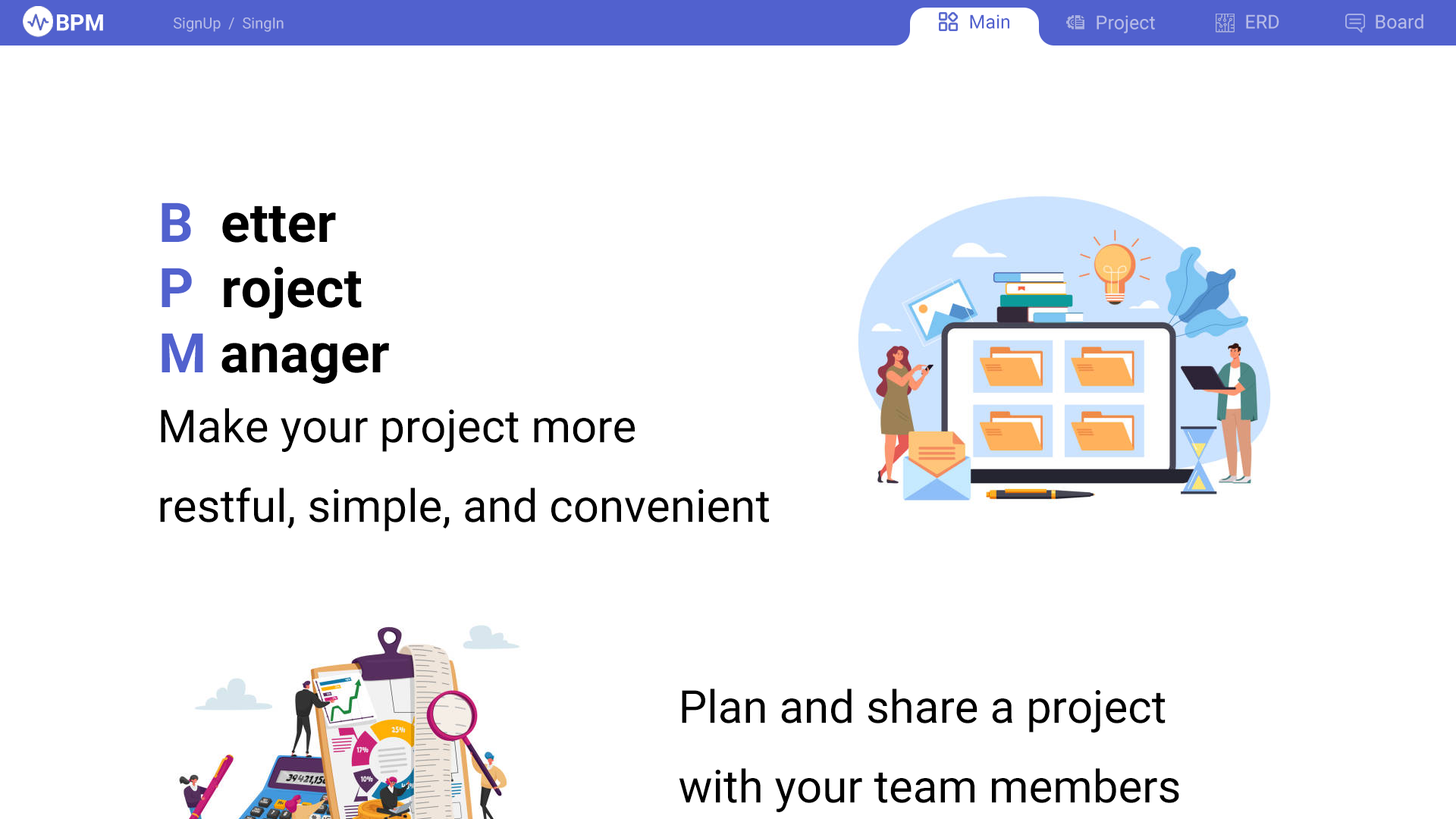
<style>
.page{position:relative;width:1456px;height:819px;background:#ffffff}
.page>*{position:absolute;margin:0}
.t1{font:22.7px "Roboto-Bold";color:#ffffff}
.t2{font:15.2px "Roboto-Regular";color:#b6bbe7}
.t3{font:19px "Roboto-Regular";color:#5161ce}
.t4{font:19px "Roboto-Regular";color:#b6bbe7}
.t5{font:54.6px/65.2px "Roboto-Bold";color:#000000}
.t6{font:54.6px/65.2px "Roboto-Bold";color:#5161ce}
.t7{font:45.5px "Roboto-Regular";color:#000000}
</style>
<div class="page">
<p class="t1" style="left:57px;top:14px;width:46px;height:17px">BPM</p>
<p class="t2" style="left:174px;top:17px;width:110px;height:15px">SignUp  /  SingIn</p>
<p class="t3" style="left:970px;top:14px;width:39px;height:15px">Main</p>
<p class="t4" style="left:1097px;top:15px;width:58px;height:18px">Project</p>
<p class="t4" style="left:1246px;top:14px;width:33px;height:15px">ERD</p>
<p class="t4" style="left:1376px;top:14px;width:47px;height:15px">Board</p>
<p class="t5" style="left:162px;top:202px;width:227px;height:182px"><span class="t6">B</span>  etter<br><span class="t6">P</span>  roject<br><span class="t6">M</span> anager</p>
<p class="t7" style="left:160px;top:408px;width:609px;height:124px">Make your project more <br>restful, simple, and convenient</p>
<p class="t7" style="left:679px;top:689px;width:500px;height:123px">Plan and share a project <br>with your team members</p>
</div>
